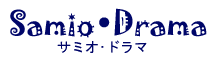
<style>
.page{position:relative;width:215px;height:60px;background:#ffffff}
.page>*{position:absolute;margin:0}
.t1{font:30px "Jokerman-Regular";color:#000669}
.t2{font:14px "MS-Gothic";color:#000669}
</style>
<div class="page">
<p class="t1" style="left:10px;top:8px;width:197px;height:30px">Samio•Drama</p>
<p class="t2" style="left:57px;top:40px;width:90px;height:13px">サミオ•ドラマ</p>
</div>
